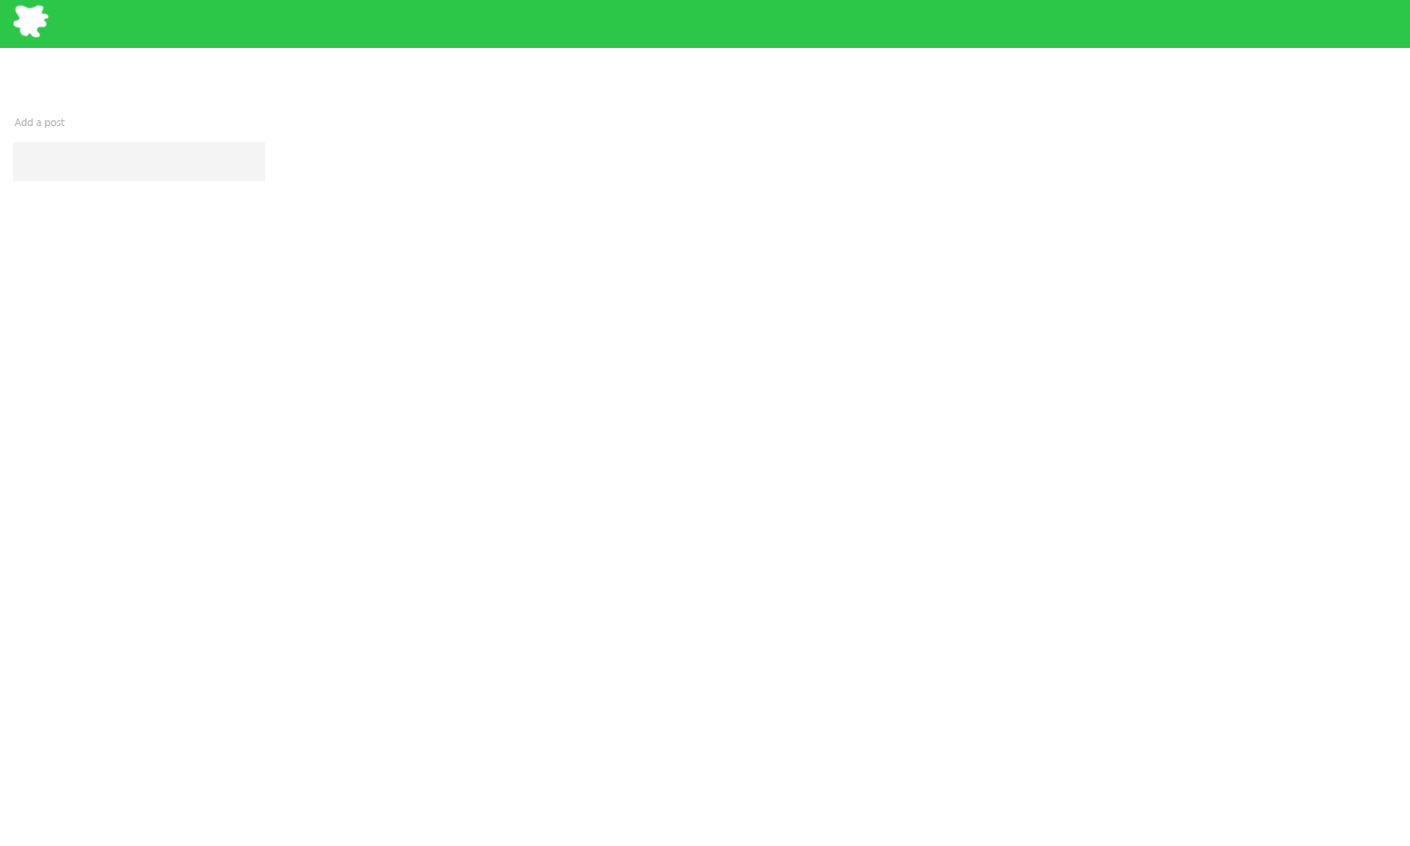
<style>
.page{position:relative;width:1410px;height:846px;background:#ffffff}
.page>*{position:absolute;margin:0}
.t1{font:10.3px "MyanmarText";color:#b7b7b7}
</style>
<div class="page">
<p class="t1" style="left:14px;top:118px;width:51px;height:10px">Add a post</p>
</div>
